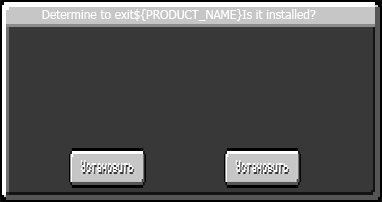
<style>
.page{position:relative;width:382px;height:202px;background:#383838}
.page>*{position:absolute;margin:0}
.t1{font:12px "Tahoma";color:#ffffff}
</style>
<div class="page">
<p class="t1" style="left:42px;top:9px;width:274px;height:12px">Determine to exit${PRODUCT_NAME}Is it installed?</p>
</div>
